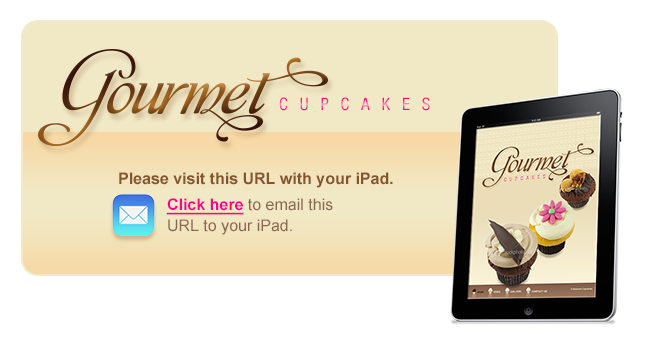
<style>
.page{position:relative;width:650px;height:350px;background:#ffffff}
.page>*{position:absolute;margin:0}
.t1{font:17.3px "HelveticaNeueLTStd-Cn";letter-spacing:0.7em}
.t2{font:16px/19.3px "Arial-BoldMT";color:#85552d}
.t3{font:16px/25.3px "Arial-BoldMT";color:#ff008a;text-decoration:underline}
.t4{font:16px/25.3px "ArialMT";color:#8b6750}
.t5{font:16px/21.3px "ArialMT";color:#8b6750}
</style>
<div class="page">
<p class="t1" style="left:279px;top:97px;width:151px;height:14px">CUPCAKES</p>
<p class="t2" style="left:119px;top:172px;width:274px;height:63px">Please visit this URL with your iPad.<br>           <span class="t3">Click here</span><span class="t4"> to email this<br></span><span class="t5">           URL to your iPad.</span></p>
</div>
